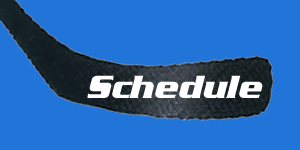
<style>
.page{position:relative;width:300px;height:150px;background:#2175d9}
.page>*{position:absolute;margin:0}
.t1{font:33.3px "SerpentineD-BoldItal";color:#ffffff}
</style>
<div class="page">
<p class="t1" style="left:87px;top:75px;width:176px;height:23px">Schedule</p>
</div>
